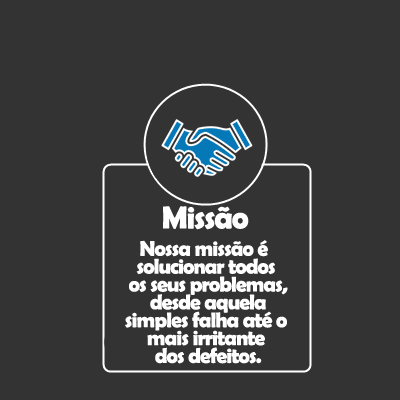
<style>
.page{position:relative;width:400px;height:400px;background:#333333}
.page>*{position:absolute;margin:0}
.t1{font:32px "BerlinSansFBDemi-Bold";letter-spacing:-0.04em;color:#ffffff}
.t2{font:21.3px/17.9px "BerlinSansFBDemi-Bold";letter-spacing:-0.04em;color:#ffffff}
</style>
<div class="page">
<p class="t1" style="left:163px;top:206px;width:86px;height:24px">Missão</p>
<p class="t2" style="left:125px;top:240px;width:163px;height:124px;text-align:center">Nossa missão é <br>solucionar todos<br> os seus problemas,<br> desde aquela<br> simples falha até o <br>mais irritante<br> dos defeitos.</p>
</div>
